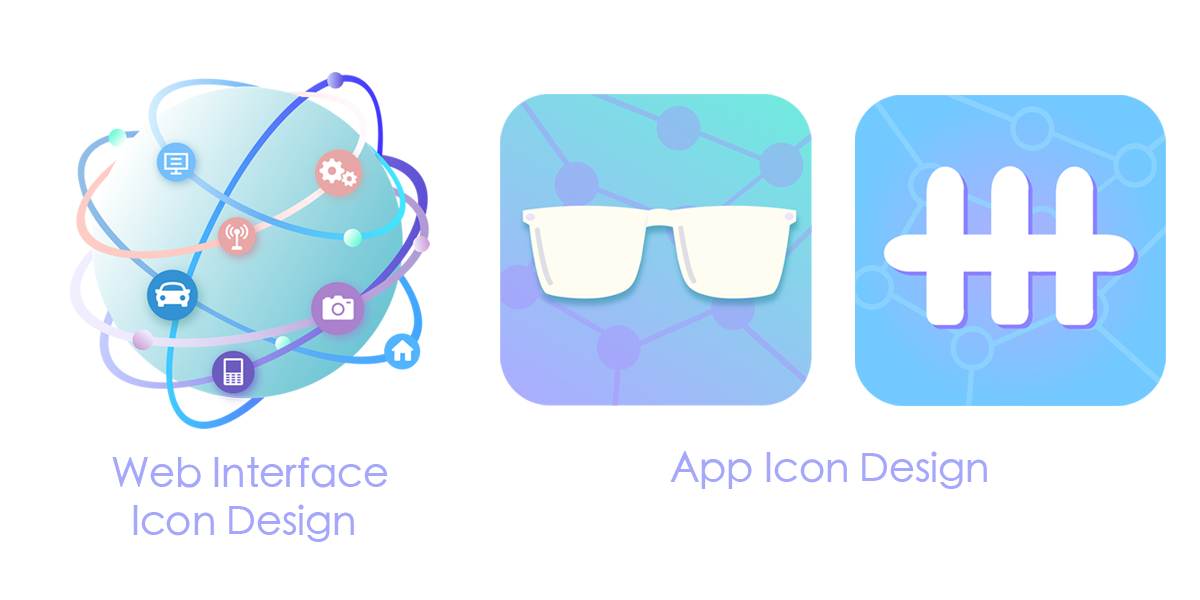
<style>
.page{position:relative;width:1200px;height:600px;background:#ffffff}
.page>*{position:absolute;margin:0}
.t1{font:40px "STHeitiSC-Medium";color:#a4a7fa}
</style>
<div class="page">
<p class="t1" style="left:112px;top:457px;width:276px;height:85px">Web Interface<br>  Icon Design</p>
<p class="t1" style="left:670px;top:451px;width:317px;height:38px">App Icon Design</p>
</div>
